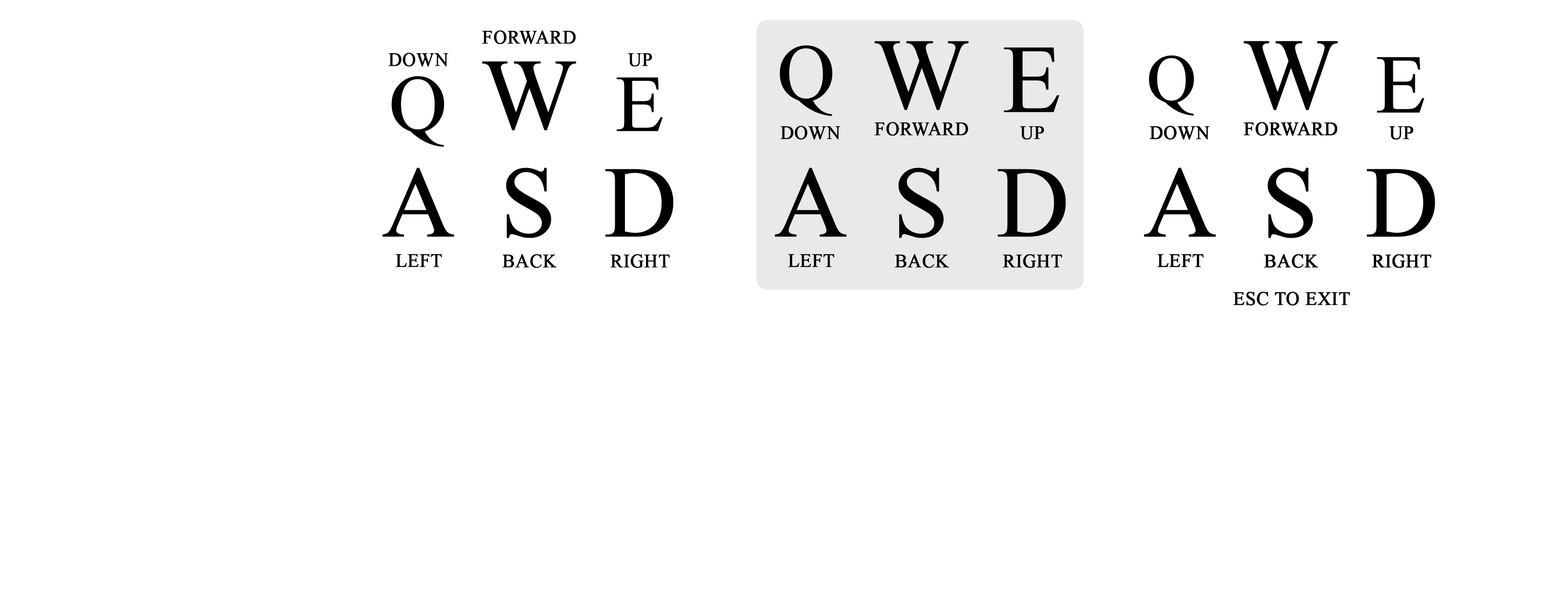
<style>
.page{position:relative;width:1568px;height:597px;background:#ffffff}
.page>*{position:absolute;margin:0}
.t1{font:18.6px "TimesNewRomanPSMT";letter-spacing:0.01em;color:#000000;font-weight:bold}
.t2{font:101.3px "TimesNewRomanPSMT";letter-spacing:0.01em;color:#000000;font-weight:bold}
.t3{font:80.3px "TimesNewRomanPSMT";letter-spacing:0.01em;color:#000000;font-weight:bold}
.t4{font:96.5px "TimesNewRomanPSMT";letter-spacing:0.01em;color:#000000;font-weight:bold}
.t5{font:68.5px "TimesNewRomanPSMT";letter-spacing:0.01em;color:#000000;font-weight:bold}
.t6{font:82.3px "TimesNewRomanPSMT";letter-spacing:0.01em;color:#000000;font-weight:bold}
</style>
<div class="page">
<p class="t1" style="left:482px;top:30px;width:94px;height:14px">FORWARD</p>
<p class="t2" style="left:874px;top:41px;width:95px;height:69px">W</p>
<p class="t2" style="left:1244px;top:41px;width:94px;height:69px">W</p>
<p class="t1" style="left:388px;top:53px;width:61px;height:14px">DOWN</p>
<p class="t1" style="left:628px;top:53px;width:24px;height:14px">UP</p>
<p class="t3" style="left:780px;top:45px;width:53px;height:71px">Q</p>
<p class="t4" style="left:1004px;top:47px;width:56px;height:65px">E</p>
<p class="t2" style="left:482px;top:61px;width:94px;height:69px">W</p>
<p class="t5" style="left:1149px;top:55px;width:45px;height:61px">Q</p>
<p class="t6" style="left:1377px;top:57px;width:48px;height:56px">E</p>
<p class="t3" style="left:392px;top:76px;width:52px;height:71px">Q</p>
<p class="t3" style="left:616px;top:77px;width:47px;height:54px">E</p>
<p class="t1" style="left:780px;top:126px;width:61px;height:14px">DOWN</p>
<p class="t1" style="left:874px;top:122px;width:94px;height:14px">FORWARD</p>
<p class="t1" style="left:1149px;top:126px;width:61px;height:14px">DOWN</p>
<p class="t1" style="left:1244px;top:122px;width:94px;height:14px">FORWARD</p>
<p class="t1" style="left:1020px;top:126px;width:24px;height:14px">UP</p>
<p class="t1" style="left:1389px;top:126px;width:25px;height:14px">UP</p>
<p class="t2" style="left:382px;top:168px;width:72px;height:69px">A</p>
<p class="t2" style="left:506px;top:168px;width:46px;height:70px">S</p>
<p class="t2" style="left:605px;top:169px;width:68px;height:68px">D</p>
<p class="t2" style="left:775px;top:168px;width:72px;height:69px">A</p>
<p class="t2" style="left:898px;top:168px;width:46px;height:70px">S</p>
<p class="t2" style="left:998px;top:169px;width:68px;height:68px">D</p>
<p class="t2" style="left:1144px;top:168px;width:72px;height:69px">A</p>
<p class="t2" style="left:1268px;top:168px;width:45px;height:70px">S</p>
<p class="t2" style="left:1367px;top:169px;width:68px;height:68px">D</p>
<p class="t1" style="left:395px;top:254px;width:47px;height:13px">LEFT</p>
<p class="t1" style="left:502px;top:254px;width:55px;height:14px">BACK</p>
<p class="t1" style="left:610px;top:254px;width:60px;height:14px">RIGHT</p>
<p class="t1" style="left:788px;top:254px;width:46px;height:13px">LEFT</p>
<p class="t1" style="left:895px;top:254px;width:54px;height:14px">BACK</p>
<p class="t1" style="left:1003px;top:254px;width:59px;height:14px">RIGHT</p>
<p class="t1" style="left:1157px;top:254px;width:46px;height:13px">LEFT</p>
<p class="t1" style="left:1264px;top:254px;width:55px;height:14px">BACK</p>
<p class="t1" style="left:1372px;top:254px;width:59px;height:14px">RIGHT</p>
<p class="t1" style="left:1233px;top:292px;width:117px;height:13px">ESC TO EXIT</p>
</div>
